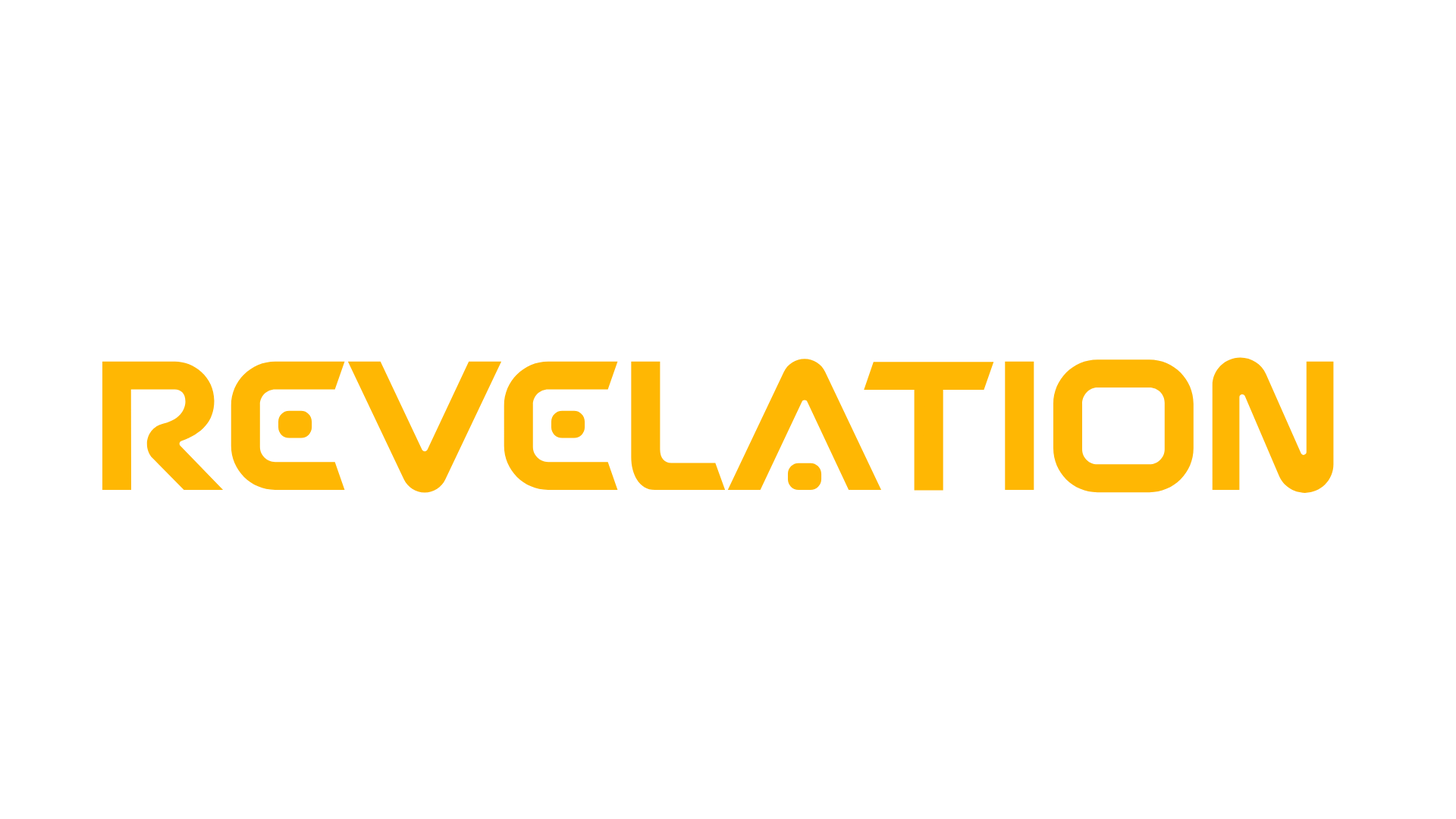
<style>
.page{position:relative;width:1456px;height:819px;background:#ffffff}
.page>*{position:absolute;margin:0}
.t1{font:183.7px "AUTOMATADISPLAY";color:#ffb703}
</style>
<div class="page">
<p class="t1" style="left:102px;top:357px;width:1232px;height:136px">REVELATION</p>
</div>
